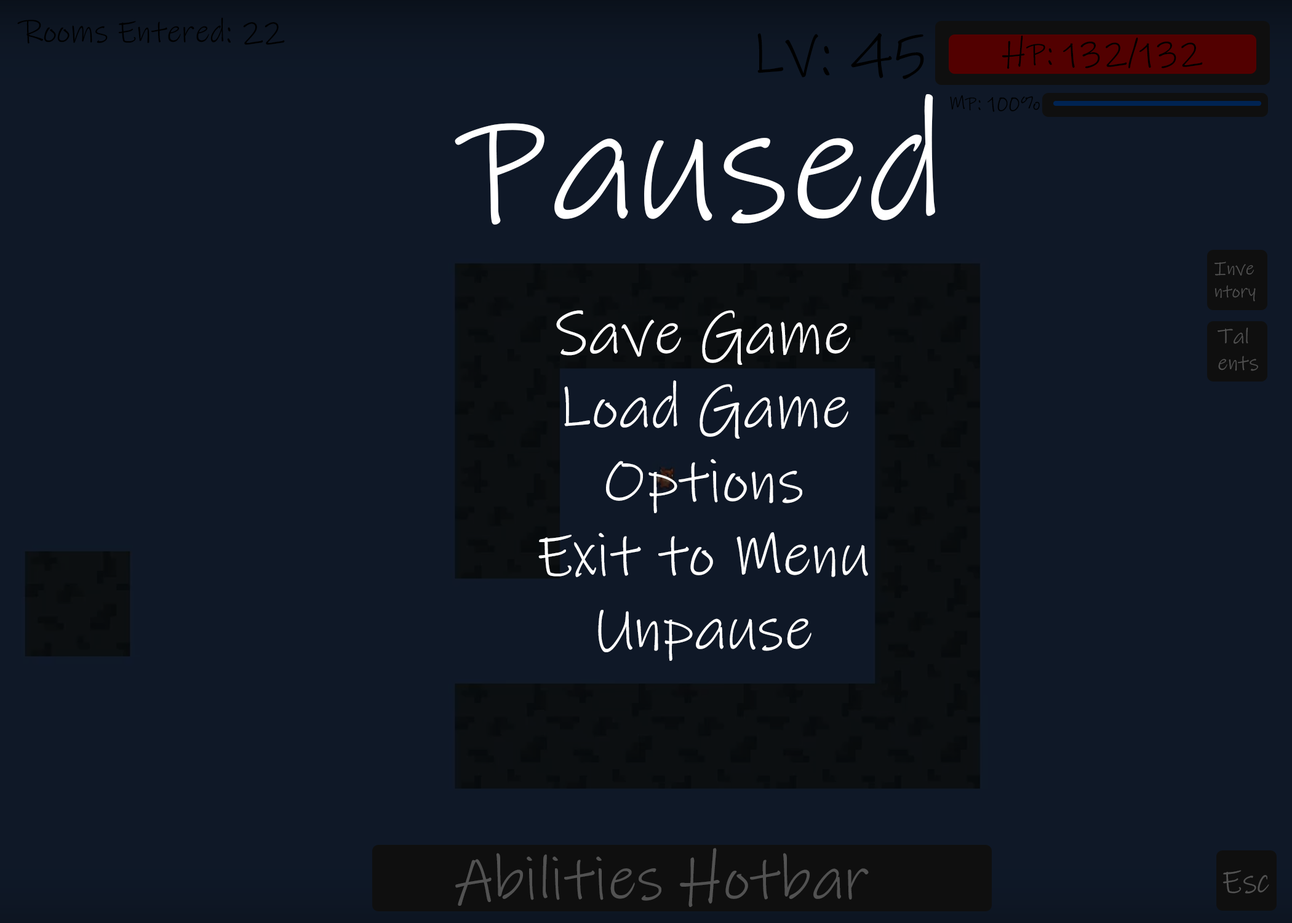
<style>
.page{position:relative;width:1292px;height:923px;background:#0f1827}
.page>*{position:absolute;margin:0}
.t1{font:32px "InkFree";color:#000000}
.t2{font:61.5px "InkFree";color:#000000}
.t3{font:34.8px "InkFree";color:#000000}
.t4{font:163.4px "InkFree";color:#ffffff}
.t5{font:20.8px "InkFree";color:#010101}
.t6{font:18.9px "InkFree";color:#525252}
.t7{font:61.5px "InkFree";color:#ffffff}
.t8{font:22px "InkFree";color:#525252}
.t9{font:61.5px "InkFree";color:#525252}
.t10{font:33.7px "InkFree";color:#525252}
</style>
<div class="page">
<p class="t1" style="left:17px;top:17px;width:268px;height:28px">Rooms Entered: 22</p>
<p class="t2" style="left:757px;top:33px;width:167px;height:46px">LV: 45</p>
<p class="t3" style="left:1002px;top:35px;width:201px;height:34px">HP: 132/132</p>
<p class="t4" style="left:455px;top:94px;width:480px;height:131px">Paused</p>
<p class="t5" style="left:950px;top:95px;width:90px;height:17px">MP: 100%</p>
<p class="t6" style="left:1215px;top:261px;width:41px;height:40px">Inve<br>ntory</p>
<p class="t7" style="left:538px;top:310px;width:330px;height:351px;text-align:center">Save Game<br>Load Game<br>Options<br>Exit to Menu<br>Unpause</p>
<p class="t8" style="left:1218px;top:327px;width:40px;height:44px">Tal<br>ents</p>
<p class="t9" style="left:455px;top:848px;width:414px;height:59px">Abilities Hotbar</p>
<p class="t10" style="left:1223px;top:870px;width:46px;height:23px">Esc</p>
</div>
